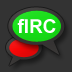
<style>
.page{position:relative;width:72px;height:72px;background:#333333}
.page>*{position:absolute;margin:0}
.t1{font:19px "Arial-BoldMT";color:#ffffff}
</style>
<div class="page">
<p class="t1" style="left:17px;top:19px;width:39px;height:14px">fIRC</p>
</div>
